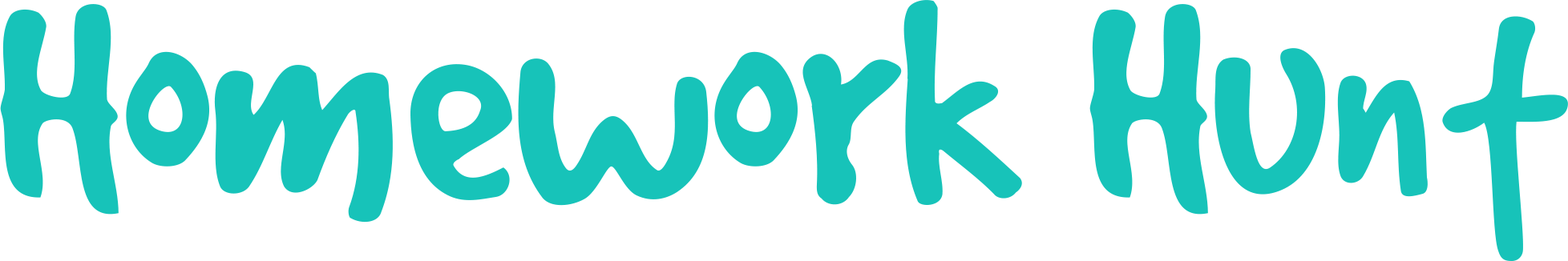
<style>
.page{position:relative;width:1568px;height:261px;background:#ffffff}
.page>*{position:absolute;margin:0}
.t1{font:320.7px "GoodDog";color:#17c3b9}
</style>
<div class="page">
<p class="t1" style="left:0px;top:0px;width:1568px;height:261px">Homework Hunt</p>
</div>
